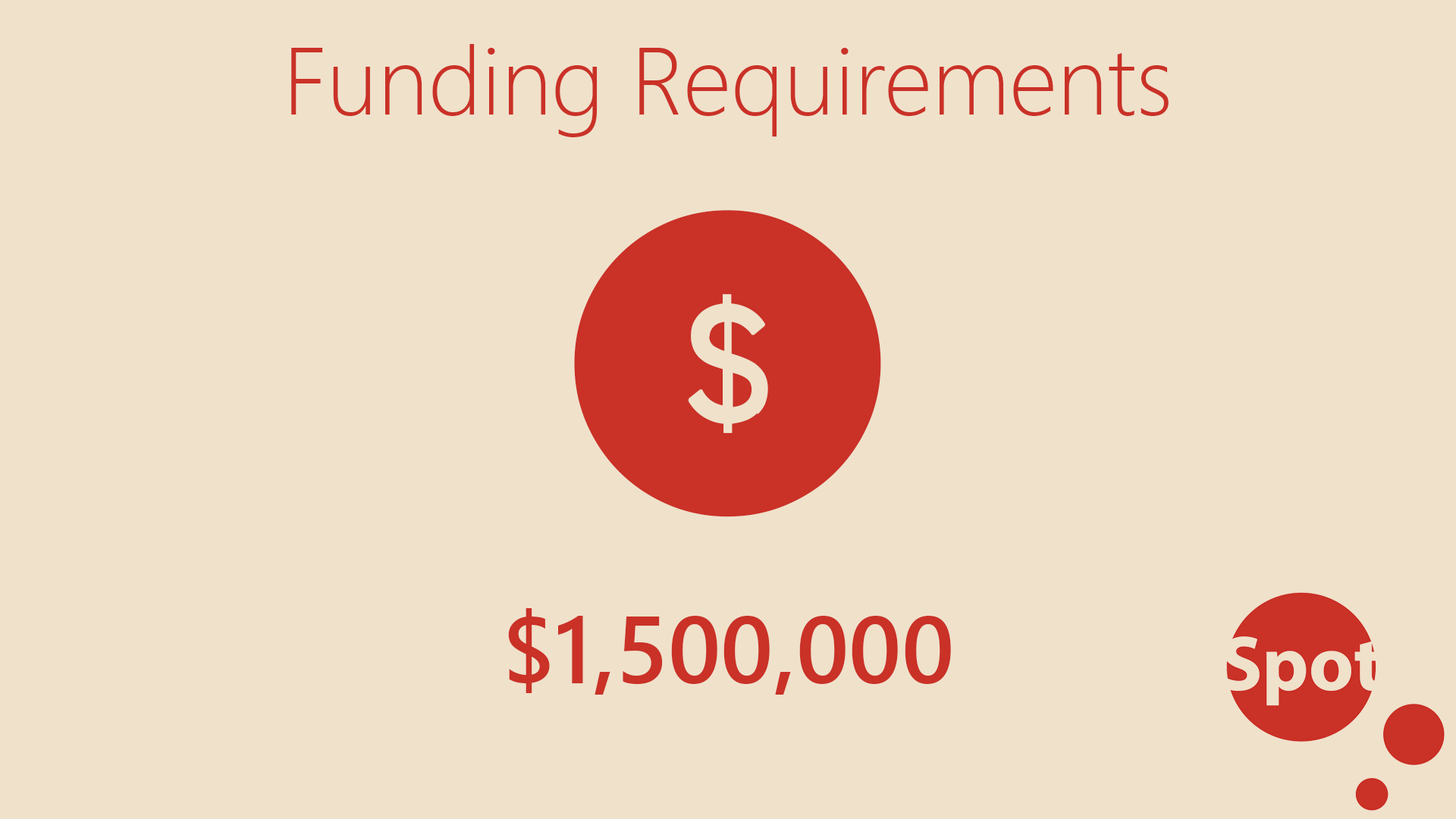
<style>
.page{position:relative;width:1456px;height:819px;background:#f0e1cb}
.page>*{position:absolute;margin:0}
.t1{font:94.8px "SegoeUI-Light";color:#ca3127}
.t2{font:94.8px "SegoeUI-Semibold";color:#ca3127}
</style>
<div class="page">
<p class="t1" style="left:291px;top:44px;width:878px;height:651px;text-align:center">Funding Requirements<br><br><br><br><br><span class="t2">$1,500,000</span></p>
</div>
